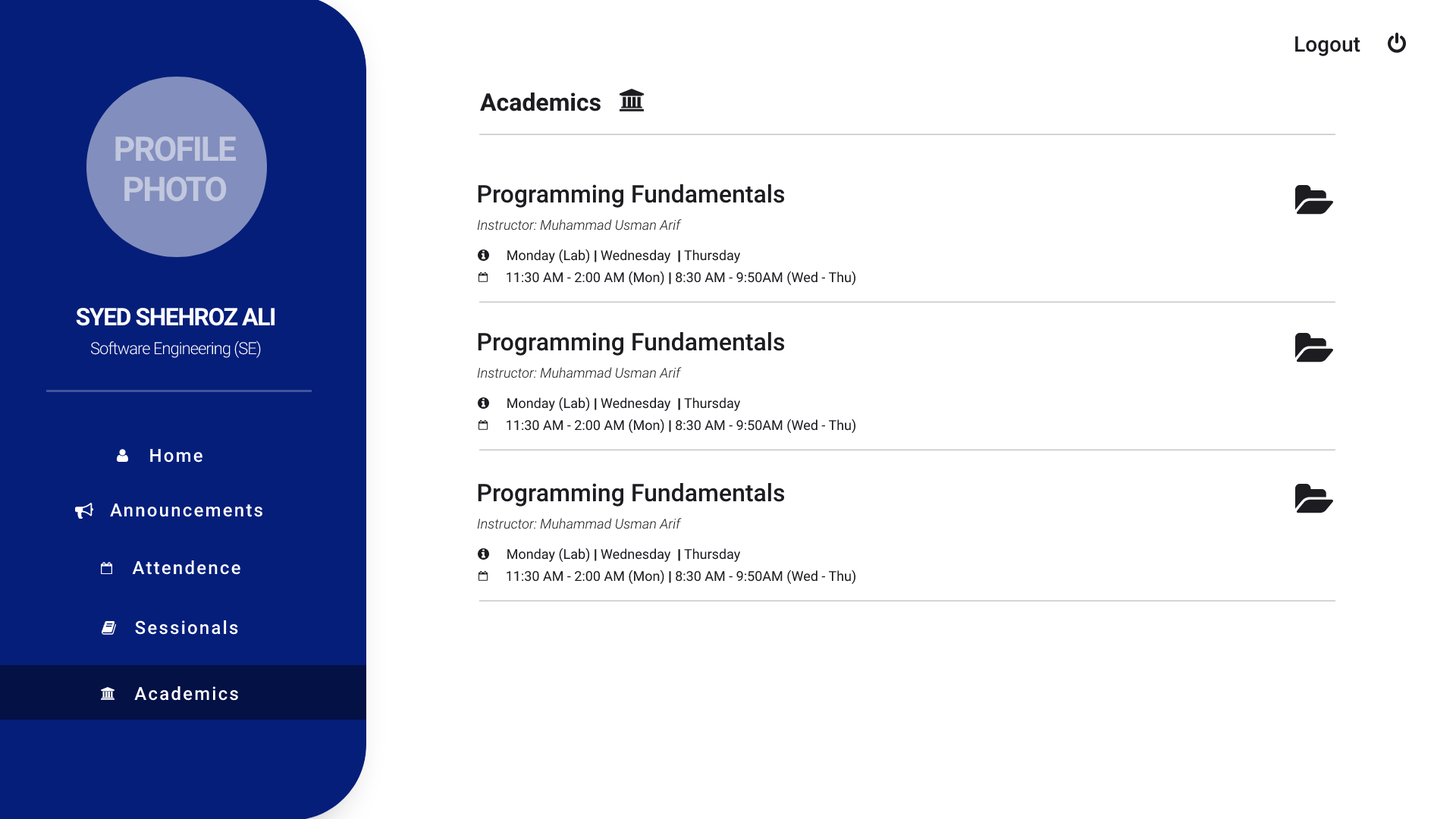
<style>
.page{position:relative;width:1456px;height:819px;background:#ffffff}
.page>*{position:absolute;margin:0}
.t1{font:21.2px "Roboto-Medium";color:#1c1c21}
.t2{font:24.3px "Roboto-Bold";color:#1c1c21}
.t3{font:33.8px "Roboto-Bold";letter-spacing:-0.046em;color:#c1c7de}
.t4{font:24.3px "Roboto-Medium";color:#1c1c21}
.t5{font:13.6px "Roboto-LightItalic";color:#1c1c21}
.t6{font:13.6px "Roboto-Regular";color:#1c1c21}
.t7{font:13.6px "Roboto-Black";color:#1c1c21;font-weight:bold}
.t8{font:24.3px "Roboto-Bold";letter-spacing:-0.046em;color:#ffffff}
.t9{font:16.7px "Roboto-Light";letter-spacing:-0.046em;color:#ffffff}
.t10{font:18.2px "Roboto-Medium";letter-spacing:0.092em;color:#ffffff}
</style>
<div class="page">
<p class="t1" style="left:1295px;top:36px;width:65px;height:20px">Logout</p>
<p class="t2" style="left:480px;top:93px;width:121px;height:18px">Academics</p>
<p class="t3" style="left:115px;top:136px;width:121px;height:66px;text-align:center">PROFILE<br>PHOTO</p>
<p class="t4" style="left:478px;top:184px;width:307px;height:24px">Programming Fundamentals</p>
<p class="t5" style="left:477px;top:219px;width:205px;height:12px">Instructor: Muhammad Usman Arif</p>
<p class="t6" style="left:507px;top:249px;width:234px;height:15px">Monday (Lab) <span class="t7">| </span>Wednesday  <span class="t7">| </span>Thursday</p>
<p class="t6" style="left:507px;top:271px;width:349px;height:15px">11:30 AM - 2:00 AM (Mon) <span class="t7">| </span>8:30 AM - 9:50AM (Wed - Thu)</p>
<p class="t8" style="left:76px;top:307px;width:199px;height:19px">SYED SHEHROZ ALI</p>
<p class="t9" style="left:90px;top:340px;width:171px;height:19px">Software Engineering (SE)</p>
<p class="t4" style="left:478px;top:332px;width:307px;height:24px">Programming Fundamentals</p>
<p class="t5" style="left:477px;top:367px;width:205px;height:11px">Instructor: Muhammad Usman Arif</p>
<p class="t6" style="left:507px;top:397px;width:234px;height:15px">Monday (Lab) <span class="t7">| </span>Wednesday  <span class="t7">| </span>Thursday</p>
<p class="t6" style="left:507px;top:419px;width:349px;height:15px">11:30 AM - 2:00 AM (Mon) <span class="t7">| </span>8:30 AM - 9:50AM (Wed - Thu)</p>
<p class="t10" style="left:150px;top:448px;width:52px;height:15px">Home</p>
<p class="t4" style="left:478px;top:483px;width:307px;height:24px">Programming Fundamentals</p>
<p class="t10" style="left:110px;top:503px;width:152px;height:14px">Announcements</p>
<p class="t5" style="left:477px;top:518px;width:205px;height:11px">Instructor: Muhammad Usman Arif</p>
<p class="t6" style="left:507px;top:548px;width:234px;height:15px">Monday (Lab) <span class="t7">| </span>Wednesday  <span class="t7">| </span>Thursday</p>
<p class="t10" style="left:132px;top:560px;width:108px;height:15px">Attendence</p>
<p class="t6" style="left:507px;top:570px;width:349px;height:15px">11:30 AM - 2:00 AM (Mon) <span class="t7">| </span>8:30 AM - 9:50AM (Wed - Thu)</p>
<p class="t10" style="left:135px;top:620px;width:103px;height:15px">Sessionals</p>
<p class="t10" style="left:134px;top:686px;width:104px;height:15px">Academics</p>
</div>
